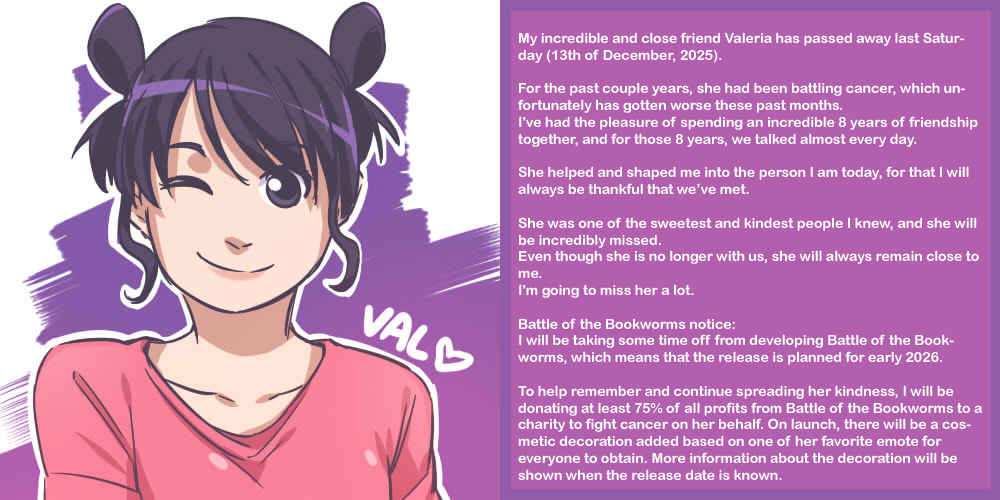
<style>
.page{position:relative;width:1000px;height:500px;background:#b25fad}
.page>*{position:absolute;margin:0}
.t1{font:14px "ArialRoundedMTBold";color:#ffffff}
</style>
<div class="page">
<p class="t1" style="left:517px;top:32px;width:465px;height:448px">My incredible and close friend Valeria has passed away last Saturday (13th of December, 2025). <br><br>For the past couple years, she had been battling cancer, which unfortunately has gotten worse these past months.<br>I've had the pleasure of spending an incredible 8 years of friendship together, and for those 8 years, we talked almost every day.<br><br>She helped and shaped me into the person I am today, for that I will always be thankful that we’ve met.<br><br>She was one of the sweetest and kindest people I knew, and she will be incredibly missed.<br>Even though she is no longer with us, she will always remain close to me.<br>I'm going to miss her a lot.<br><br>Battle of the Bookworms notice:<br>I will be taking some time off from developing Battle of the Bookworms, which means that the release is planned for early 2026.<br><br>To help remember and continue spreading her kindness, I will be donating at least 75% of all profits from Battle of the Bookworms to a charity to fight cancer on her behalf. On launch, there will be a cosmetic decoration added based on one of her favorite emote for everyone to obtain. More information about the decoration will be shown when the release date is known.</p>
</div>
